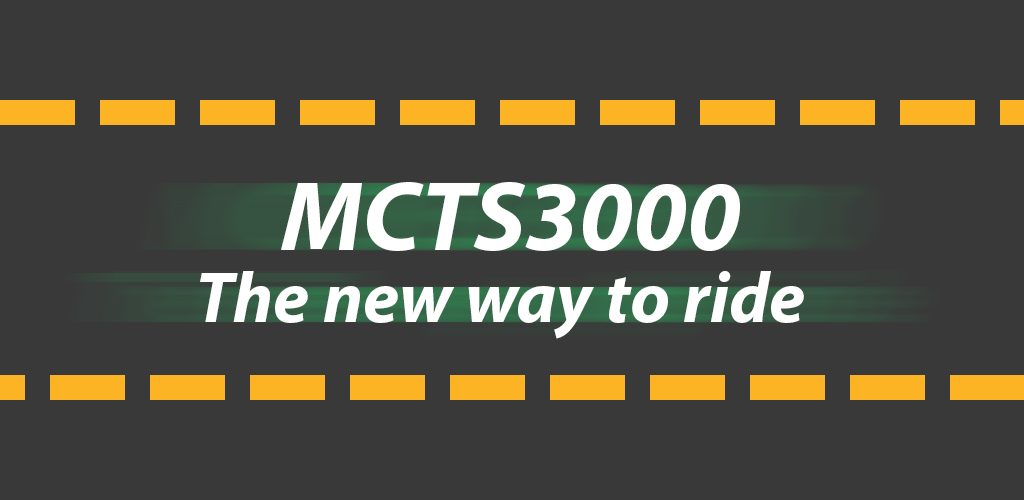
<style>
.page{position:relative;width:1024px;height:500px;background:#393939}
.page>*{position:absolute;margin:0}
.t1{font:100px "MyriadPro-BoldIt";color:#ffffff}
.t2{font:72px "MyriadPro-BoldIt";color:#ffffff}
</style>
<div class="page">
<p class="t1" style="left:281px;top:182px;width:459px;height:69px">MCTS3000</p>
<p class="t2" style="left:200px;top:271px;width:604px;height:68px">The new way to ride</p>
</div>
